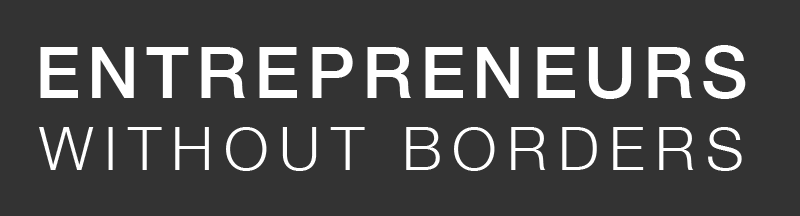
<style>
.page{position:relative;width:800px;height:216px;background:#333333}
.page>*{position:absolute;margin:0}
.t1{font:60px "HelveticaNeue-Light";letter-spacing:0.175em;color:#ffffff}
.t2{font:72px "HelveticaNeue-Medium";letter-spacing:0.1em;color:#ffffff}
</style>
<div class="page">
<p class="t1" style="left:39px;top:45px;width:707px;height:126px;text-align:center"><span class="t2">ENTREPRENEURS<br></span>WITHOUT BORDERS</p>
</div>
